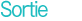
<style>
.page{position:relative;width:82px;height:21px;background:#ffffff}
.page>*{position:absolute;margin:0}
.t1{font:20px "GothicMB101Pro-Regular";letter-spacing:-0.06em;color:#1dbcc0;scale:0.9 1}
</style>
<div class="page">
<p class="t1" style="left:0px;top:0px;width:48px;height:17px">Sortie</p>
</div>
